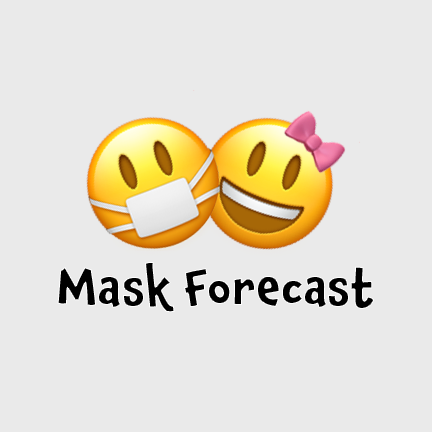
<style>
.page{position:relative;width:432px;height:432px;background:#eaeaea}
.page>*{position:absolute;margin:0}
.t1{font:48px "Chaloops-Bold";color:#000000}
</style>
<div class="page">
<p class="t1" style="left:57px;top:262px;width:318px;height:51px">Mask Forecast</p>
</div>
